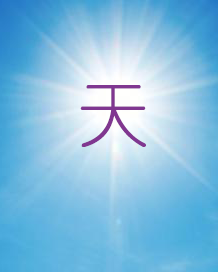
<style>
.page{position:relative;width:218px;height:272px}
.page>*{position:absolute;margin:0}
.t1{font:72px "YouYuan";color:#803790}
</style>
<div class="page">
<p class="t1" style="left:80px;top:85px;width:66px;height:62px">天</p>
</div>
